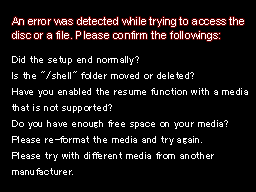
<style>
.page{position:relative;width:256px;height:192px;background:#000000}
.page>*{position:absolute;margin:0}
.t1{font:11px/14px "ArialMT";color:#ffffff}
.t2{font:11px/16px "MS-UIGothic";color:#ffffff}
</style>
<div class="page">
<p class="t1" style="left:12px;top:17px;width:232px;height:24px">An error was detected while trying to access the <br>disc or a file. Please confirm the followings:</p>
<p class="t2" style="left:12px;top:56px;width:236px;height:119px">Did the setup end normally?<br>Is the "/shell" folder moved or deleted?<br>Have you enabled the resume function with a media <br>that is not supported?<br>Do you have enough free space on your media?<br>Please re-format the media and try again.<br>Please try with different media from another <br>manufacturer.</p>
</div>
